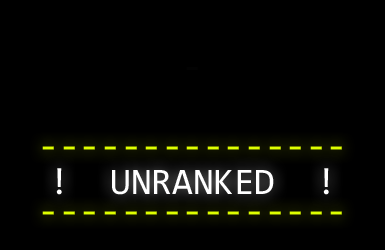
<style>
.page{position:relative;width:385px;height:250px;background:#000000}
.page>*{position:absolute;margin:0}
.t1{font:37.4px "Consolas";color:#deff00}
.t2{font:37.4px "Consolas";color:#ffffff}
</style>
<div class="page">
<p class="t1" style="left:42px;top:146px;width:300px;height:4px">---------------</p>
<p class="t2" style="left:56px;top:168px;width:273px;height:27px">!  UNRANKED  !</p>
<p class="t1" style="left:42px;top:211px;width:300px;height:4px">---------------</p>
</div>
